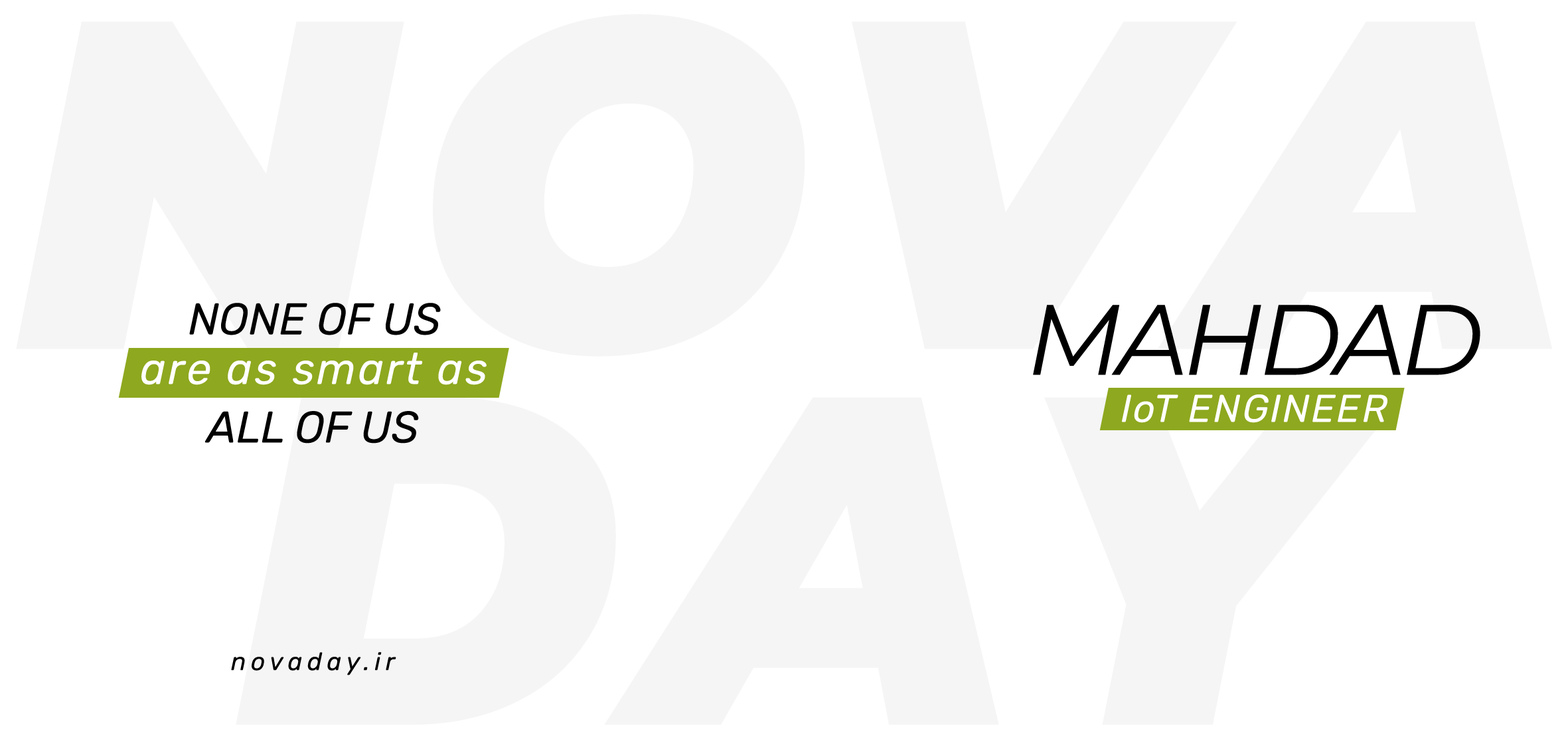
<style>
.page{position:relative;width:1568px;height:745px;background:#ffffff}
.page>*{position:absolute;margin:0}
.t1{font:44.3px "Rubik-Italic";color:#000000}
.t2{font:99.6px "Montserrat-Italic";letter-spacing:-0.05em;color:#000000}
.t3{font:44.3px "Rubik-Italic";letter-spacing:0.05em;color:#ffffff}
.t4{font:38.7px "Rubik-Italic";letter-spacing:0.05em;color:#ffffff}
.t5{font:24.9px "Rubik-Italic";letter-spacing:0.2em;color:#000000}
</style>
<div class="page">
<p class="t1" style="left:189px;top:303px;width:252px;height:32px">NONE OF US</p>
<p class="t2" style="left:1033px;top:305px;width:447px;height:70px">MAHDAD</p>
<p class="t3" style="left:141px;top:353px;width:346px;height:32px">are as smart as</p>
<p class="t4" style="left:1122px;top:394px;width:265px;height:29px">IoT ENGINEER</p>
<p class="t1" style="left:205px;top:411px;width:214px;height:32px">ALL OF US</p>
<p class="t5" style="left:231px;top:652px;width:165px;height:23px">novaday.ir</p>
</div>
